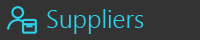
<style>
.page{position:relative;width:200px;height:40px;background:#333333}
.page>*{position:absolute;margin:0}
.t1{font:25px "SegoeUI-Semilight";color:#2cd1ea}
</style>
<div class="page">
<p class="t1" style="left:47px;top:9px;width:97px;height:25px">Suppliers</p>
</div>
